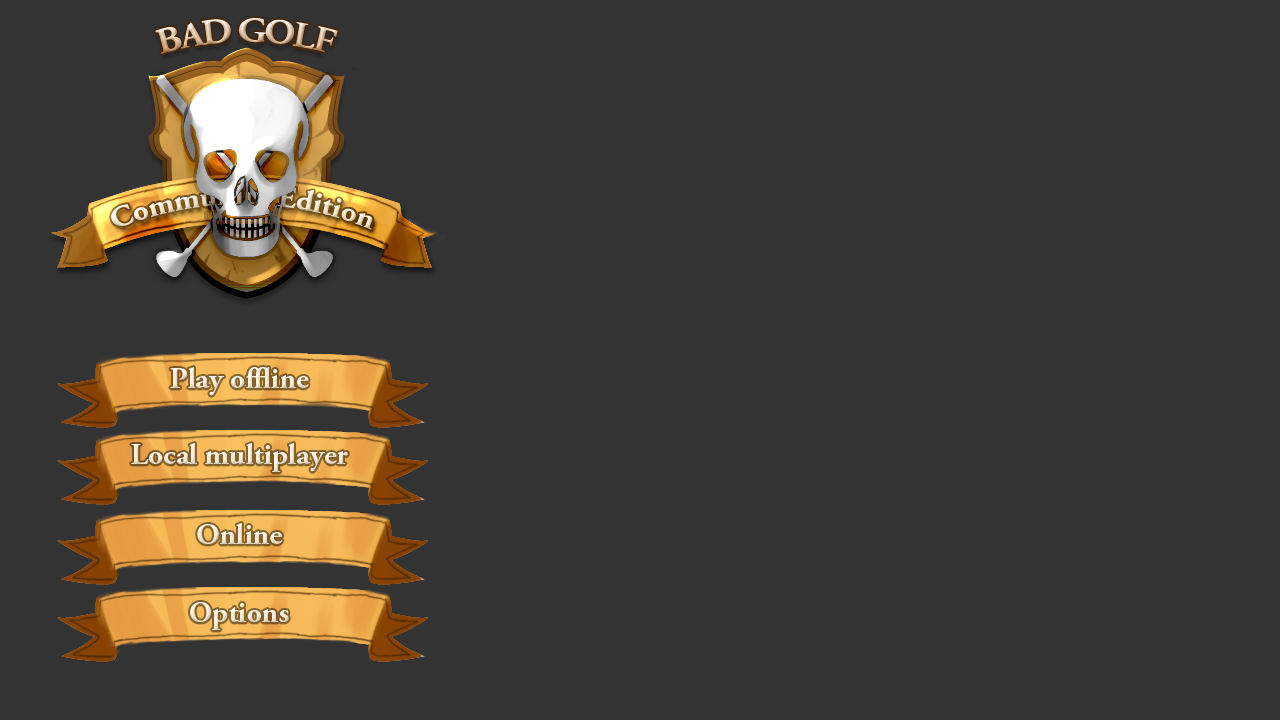
<style>
.page{position:relative;width:1280px;height:720px;background:#333333}
.page>*{position:absolute;margin:0}
.t1{font:36px "AGaramondPro-Bold";letter-spacing:-0.05em}
.t2{font:30px "AGaramondPro-Bold";color:#fff0d6}
</style>
<div class="page">
<p class="t1" style="left:155px;top:18px;width:183px;height:36px">BAD GOLF</p>
<p class="t2" style="left:170px;top:367px;width:139px;height:29px">Play offline</p>
<p class="t2" style="left:131px;top:443px;width:217px;height:29px">Local multiplayer</p>
<p class="t2" style="left:197px;top:523px;width:86px;height:21px">Online</p>
<p class="t2" style="left:190px;top:602px;width:99px;height:28px">Options</p>
</div>
